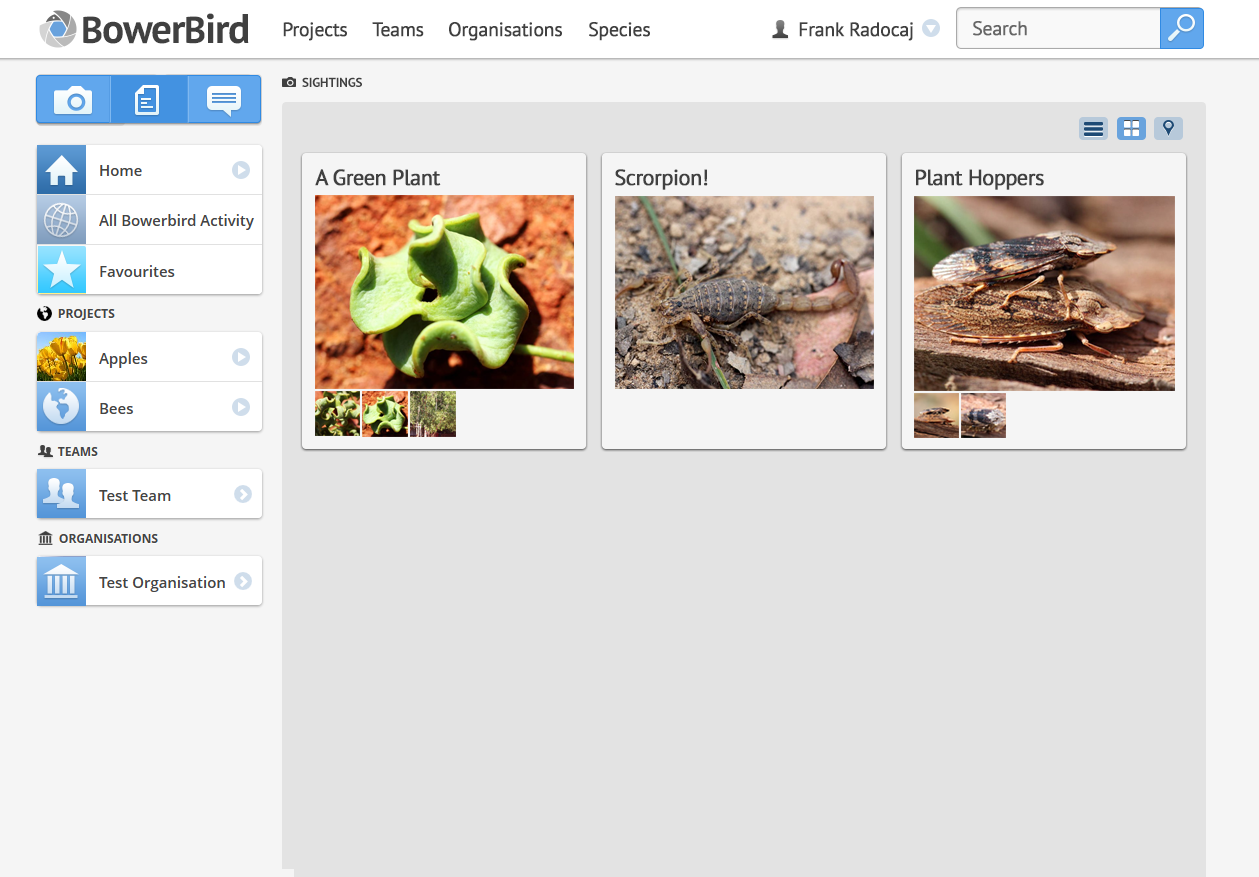
<style>
.page{position:relative;width:1259px;height:877px;background:#e3e3e3}
.page>*{position:absolute;margin:0}
.t1{font:41.3px "PTSans-Bold";letter-spacing:-0.03em;color:#404040}
.t2{font:37.3px "PTSans-Bold";letter-spacing:-0.03em;color:#404040}
.t3{font:19.5px "PTSans-Regular";letter-spacing:-0.03em;color:#404040;font-weight:bold}
.t4{font:19.5px "PTSans-Regular";letter-spacing:-0.03em;color:#666666;font-weight:bold}
.t5{font:13px "PTSans-Bold";letter-spacing:-0.01em;color:#404040}
.t6{font:22px "PTSans-Regular";letter-spacing:-0.04em;color:#404040;font-weight:bold}
</style>
<div class="page">
<p class="t1" style="left:83px;top:13px;width:166px;height:31px"><span class="t2">B</span>ower<span class="t2">B</span>ird</p>
<p class="t3" style="left:283px;top:22px;width:64px;height:19px">Projects</p>
<p class="t3" style="left:372px;top:22px;width:52px;height:15px">Teams</p>
<p class="t3" style="left:449px;top:22px;width:113px;height:19px">Organisations</p>
<p class="t3" style="left:589px;top:22px;width:61px;height:19px">Species</p>
<p class="t3" style="left:799px;top:22px;width:114px;height:19px">Frank Radocaj</p>
<p class="t4" style="left:973px;top:21px;width:54px;height:15px">Search</p>
<p class="t5" style="left:302px;top:77px;width:60px;height:10px">SIGHTINGS</p>
<p class="t6" style="left:315px;top:169px;width:126px;height:17px">A Green Plant</p>
<p class="t6" style="left:615px;top:169px;width:93px;height:21px">Scrorpion!</p>
<p class="t6" style="left:916px;top:169px;width:128px;height:21px">Plant Hoppers</p>
</div>
